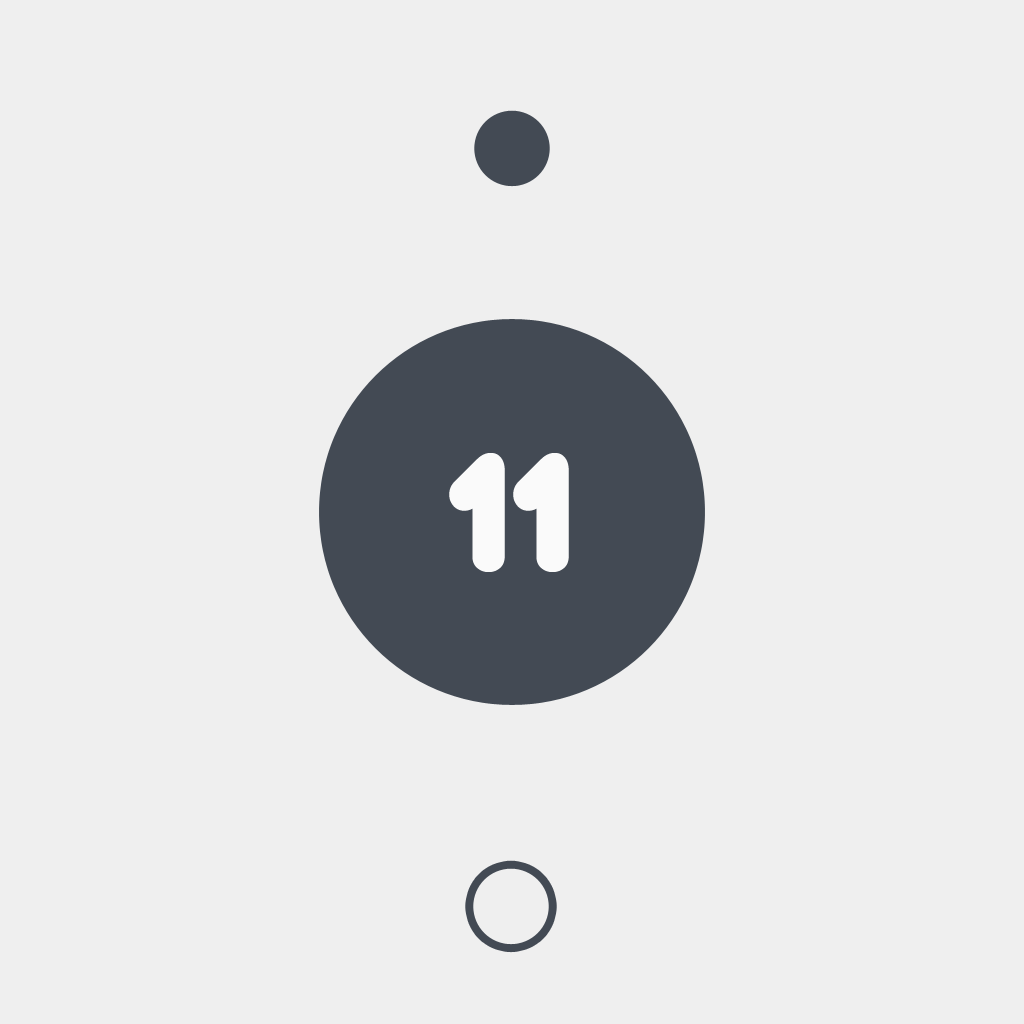
<style>
.page{position:relative;width:1024px;height:1024px;background:#efefef}
.page>*{position:absolute;margin:0}
.t1{font:196px "Junegull";color:#fafafa}
</style>
<div class="page">
<p class="t1" style="left:449px;top:453px;width:120px;height:119px">11</p>
</div>
